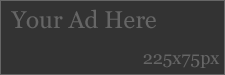
<style>
.page{position:relative;width:225px;height:75px;background:#333333}
.page>*{position:absolute;margin:0}
.t1{font:24px "Georgia";color:#666666}
.t2{font:18px "Georgia";color:#666666}
</style>
<div class="page">
<p class="t1" style="left:11px;top:9px;width:145px;height:20px">Your Ad Here</p>
<p class="t2" style="left:143px;top:54px;width:77px;height:14px">225x75px</p>
</div>
